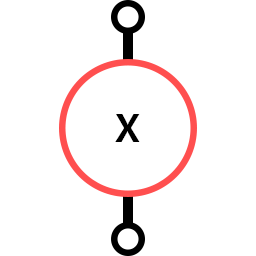
<style>
.page{position:relative;width:256px;height:256px;background:#ffffff}
.page>*{position:absolute;margin:0}
.t1{font:37.5px "MalgunGothicBold";color:#000000}
</style>
<div class="page">
<p class="t1" style="left:115px;top:114px;width:25px;height:28px">X</p>
</div>
